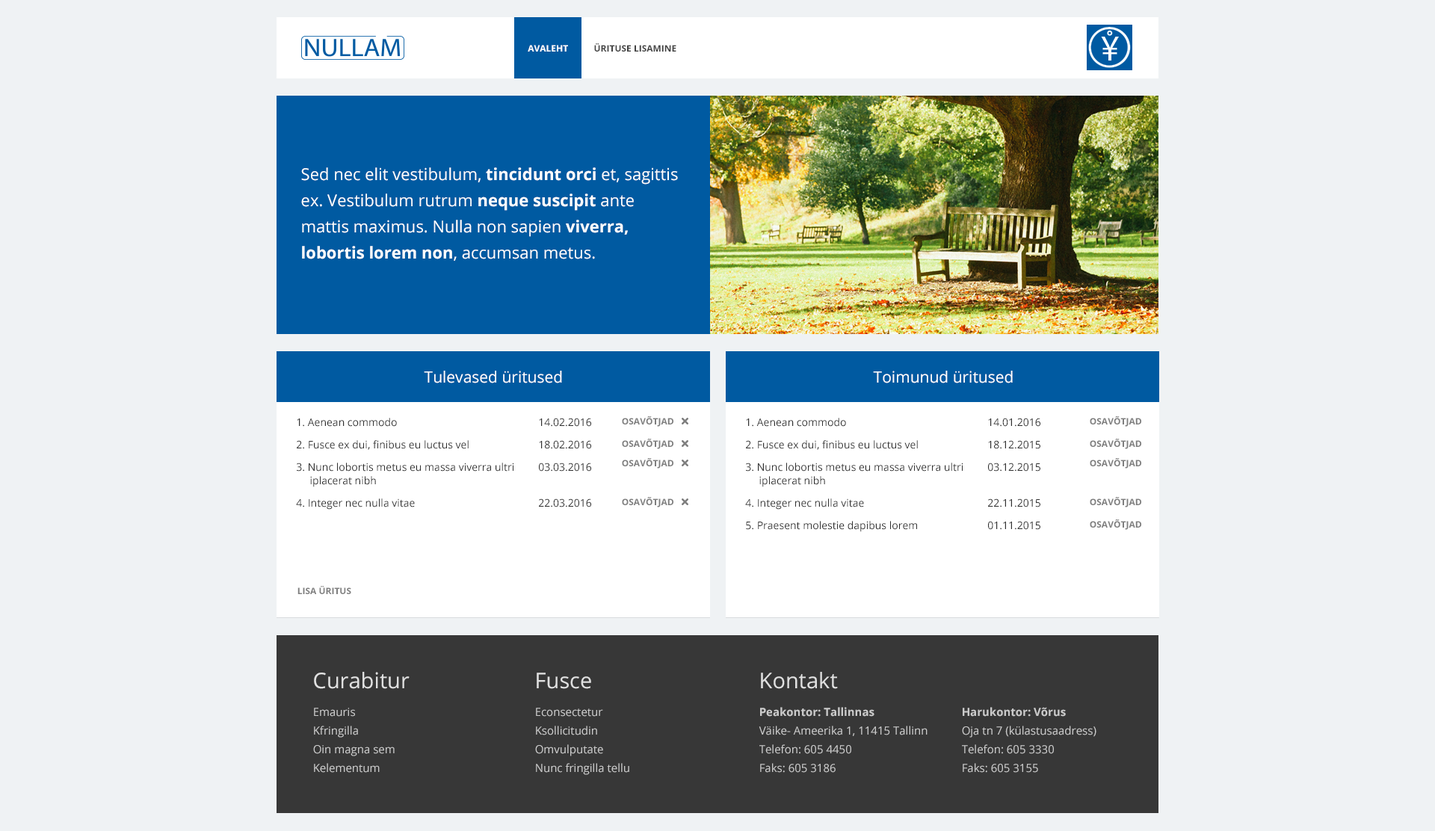
<style>
.page{position:relative;width:1435px;height:831px;background:#eff2f4}
.page>*{position:absolute;margin:0}
.t1{font:9px "OpenSans-Bold";color:#424242;text-transform:uppercase}
.t2{font:9px "OpenSans-Bold";color:#ffffff;text-transform:uppercase}
.t3{font:16.4px/26.2px "OpenSans";color:#ffffff}
.t4{font:16.4px/26.2px "OpenSans-Bold";color:#ffffff}
.t5{font:15.7px "OpenSans";color:#ffffff}
.t6{font:10.5px/22.4px "OpenSans";color:#2f2f2f}
.t7{font:10.5px/13.5px "OpenSans";color:#2f2f2f}
.t8{font:9px/19.4px "OpenSans-Bold";color:#7e7e7e;text-transform:uppercase}
.t9{font:9px/22.4px "OpenSans-Bold";color:#7e7e7e;text-transform:uppercase}
.t10{font:9px "OpenSans-Bold";color:#7e7e7e;text-transform:uppercase}
.t11{font:21.7px "OpenSans";color:#e0e0e0}
.t12{font:11.2px/18.7px "OpenSans";color:#cbcbcb}
.t13{font:11.2px/18.7px "OpenSans-Bold";color:#cbcbcb}
</style>
<div class="page">
<p class="t1" style="left:528px;top:43px;width:148px;height:9px"><span class="t2">Avaleht  </span>         Ürituse lisamine</p>
<p class="t3" style="left:301px;top:167px;width:377px;height:94px">Sed nec elit vestibulum, <span class="t4">tincidunt orci</span> et, sagittis ex. Vestibulum rutrum <span class="t4">neque suscipit</span> ante mattis maximus. Nulla non sapien <span class="t4">viverra, lobortis lorem non</span>, accumsan metus.</p>
<p class="t5" style="left:424px;top:371px;width:138px;height:12px">Tulevased üritused</p>
<p class="t5" style="left:873px;top:371px;width:140px;height:12px">Toimunud üritused</p>
<p class="t6" style="left:296px;top:418px;width:295px;height:92px">1. Aenean commodo      14.02.2016<br>2. Fusce ex dui, finibus eu luctus vel   18.02.2016<br>3. <span class="t7">Nunc lobortis metus eu massa viverra ultri 03.03.2016<br>     iplacerat nibh<br></span>4. Integer nec nulla vitae     22.03.2016</p>
<p class="t8" style="left:622px;top:416px;width:51px;height:91px;text-align:center"><span class="t9">osavõtjad<br>osavõtjad<br></span>osavõtjad<br><br>osavõtjad</p>
<p class="t6" style="left:745px;top:418px;width:295px;height:114px">1. Aenean commodo      14.01.2016<br>2. Fusce ex dui, finibus eu luctus vel   18.12.2015<br>3. <span class="t7">Nunc lobortis metus eu massa viverra ultri 03.12.2015<br>     iplacerat nibh<br></span>4. Integer nec nulla vitae     22.11.2015<br>5. Praesent molestie dapibus lorem   01.11.2015</p>
<p class="t8" style="left:1090px;top:416px;width:51px;height:114px;text-align:center"><span class="t9">osavõtjad<br>osavõtjad<br></span>osavõtjad<br><br>osavõtjad<br><span class="t9">osavõtjad</span></p>
<p class="t10" style="left:297px;top:586px;width:54px;height:8px">lisa üritus</p>
<p class="t11" style="left:314px;top:672px;width:96px;height:17px">Curabitur</p>
<p class="t11" style="left:537px;top:673px;width:54px;height:16px">Fusce</p>
<p class="t11" style="left:761px;top:672px;width:77px;height:17px">Kontakt</p>
<p class="t12" style="left:313px;top:708px;width:82px;height:65px">Emauris<br>Kfringilla<br>Oin magna sem<br>Kelementum</p>
<p class="t12" style="left:535px;top:708px;width:94px;height:67px">Econsectetur <br>Ksollicitudin <br>Omvulputate <br>Nunc fringilla tellu</p>
<p class="t12" style="left:759px;top:707px;width:168px;height:66px"><span class="t13">Peakontor: Tallinnas<br></span>Väike- Ameerika 1, 11415 Tallinn<br>Telefon: 605 4450<br>Faks: 605 3186</p>
<p class="t12" style="left:962px;top:707px;width:134px;height:66px"><span class="t13">Harukontor: Võrus<br></span>Oja tn 7 (külastusaadress)<br>Telefon: 605 3330<br>Faks: 605 3155</p>
</div>
